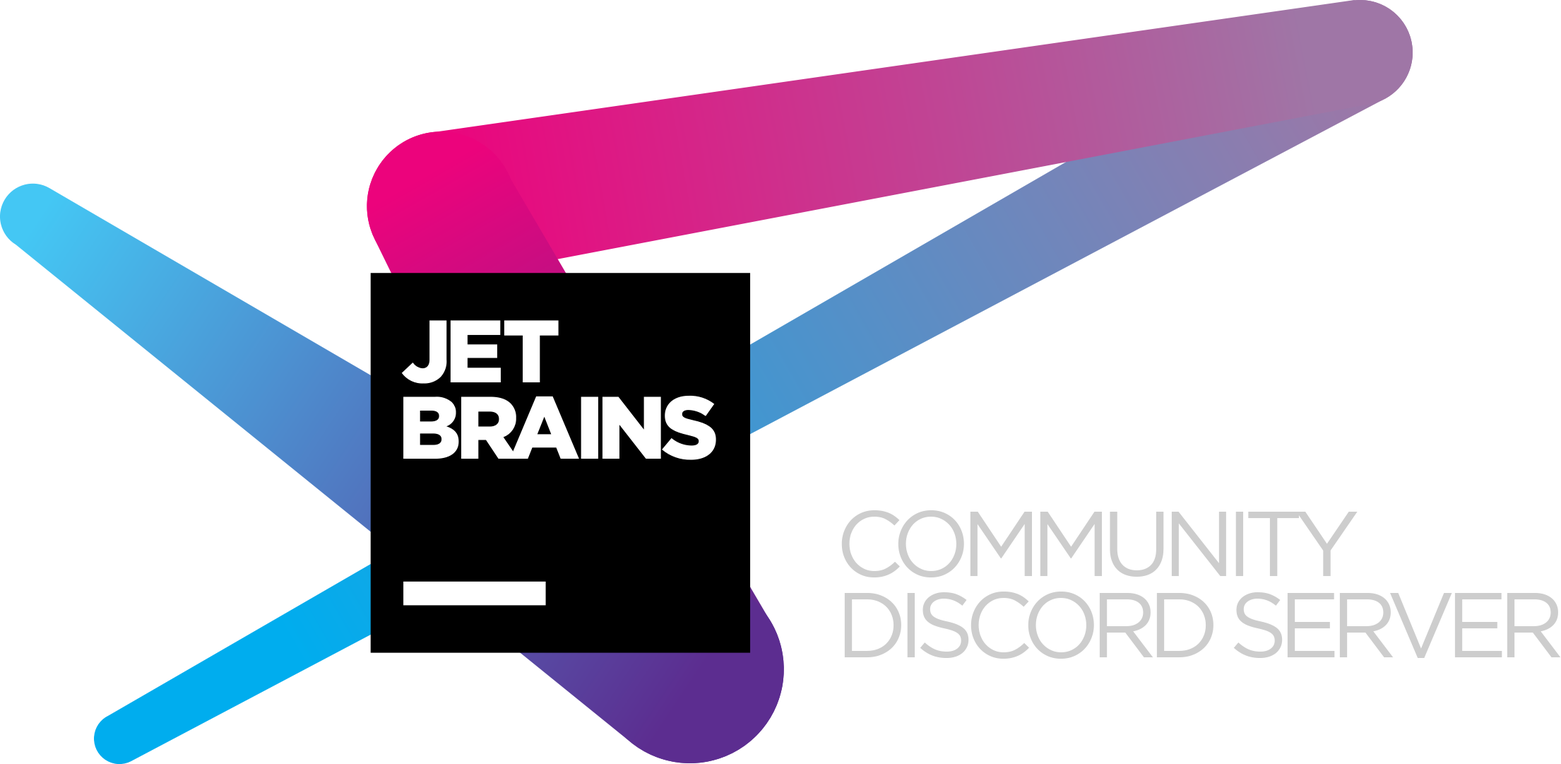
<style>
.page{position:relative;width:1561px;height:764px;background:#ffffff}
.page>*{position:absolute;margin:0}
.t1{font:91.8px/81.2px "Gotham-Book";letter-spacing:-0.1em;color:#cdcdcd;text-transform:uppercase}
</style>
<div class="page">
<p class="t1" style="left:841px;top:510px;width:720px;height:148px">Community<br>Discord Server</p>
</div>
